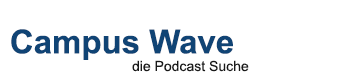
<style>
.page{position:relative;width:360px;height:80px;background:#ffffff}
.page>*{position:absolute;margin:0}
.t1{font:33px "Arial-BoldMT";color:#104475}
.t2{font:14px "ArialMT";color:#191919}
</style>
<div class="page">
<p class="t1" style="left:11px;top:29px;width:222px;height:31px">Campus Wave</p>
<p class="t2" style="left:132px;top:60px;width:117px;height:12px">die Podcast Suche</p>
</div>
